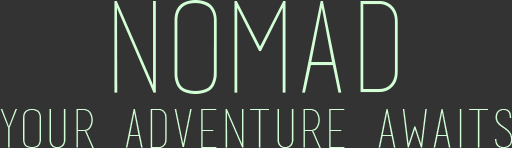
<style>
.page{position:relative;width:512px;height:148px;background:#333333}
.page>*{position:absolute;margin:0}
.t1{font:126px "basictitlefont";color:#d2ffd5}
.t2{font:53px "basictitlefont";color:#d2ffd5}
</style>
<div class="page">
<p class="t1" style="left:114px;top:0px;width:284px;height:94px">NOMAD</p>
<p class="t2" style="left:0px;top:109px;width:513px;height:39px">YOUR ADVenture awaits</p>
</div>
